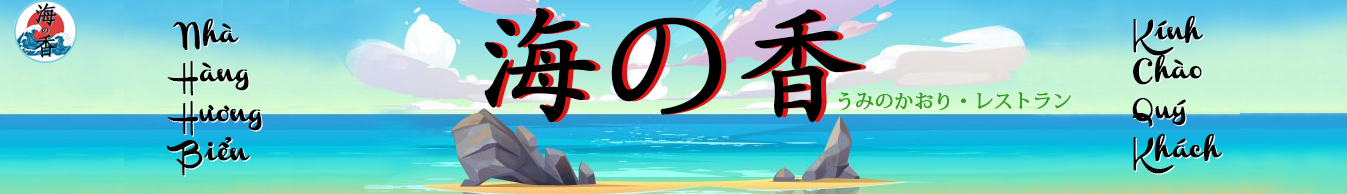
<style>
.page{position:relative;width:1347px;height:194px}
.page>*{position:absolute;margin:0}
.t1{font:128.9px "AdobeKaitiStd-Regular";color:#000000;font-weight:bold}
.t2{font:128.9px "AdobeKaitiStd-Regular";font-weight:bold}
.t3{font:32.8px "SVN-Channel";color:#000000;font-weight:bold}
.t4{font:32.8px "SVN-Channel";font-weight:bold}
.t5{font:19.1px "AdobeKaitiStd-Regular";color:#309f1d;font-weight:bold}
</style>
<div class="page">
<p class="t1" style="left:484px;top:7px;width:378px;height:116px">海の香</p>
<p class="t2" style="left:489px;top:7px;width:378px;height:116px">海の香</p>
<p class="t3" style="left:1132px;top:16px;width:90px;height:158px">Kính<br>Chào<br>Quý<br>Khách</p>
<p class="t4" style="left:1133px;top:17px;width:90px;height:158px">Kính<br>Chào<br>Quý<br>Khách</p>
<p class="t3" style="left:166px;top:19px;width:96px;height:157px">Nhà<br>Hàng<br>Hương<br>Biển</p>
<p class="t4" style="left:167px;top:20px;width:96px;height:157px">Nhà<br>Hàng<br>Hương<br>Biển</p>
<p class="t5" style="left:838px;top:92px;width:233px;height:19px">うみのかおり・レストラン</p>
</div>
